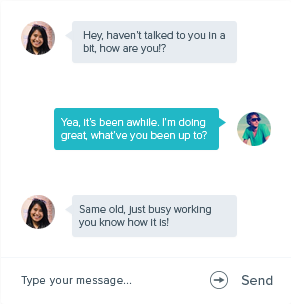
<style>
.page{position:relative;width:291px;height:304px;background:#ffffff}
.page>*{position:absolute;margin:0}
.t1{font:11px "ProximaNova-Light";color:#475965}
.t2{font:11px "ProximaNova-Light";color:#ffffff}
.t3{font:11px "ProximaNova-Light";letter-spacing:0.05em;color:#475965}
.t4{font:14px "ProximaNova-Regular";letter-spacing:0.01em;color:#475965}
</style>
<div class="page">
<p class="t1" style="left:83px;top:31px;width:142px;height:23px">Hey, haven’t talked to you in a <br>bit, how are you!?</p>
<p class="t2" style="left:61px;top:118px;width:146px;height:23px">Yea, it’s been awhile. I’m doing<br>great, what’ve you been up to?</p>
<p class="t1" style="left:79px;top:205px;width:132px;height:23px">Same old, just busy working <br>you know how it is!</p>
<p class="t3" style="left:21px;top:276px;width:111px;height:10px">Type your message...</p>
<p class="t4" style="left:241px;top:275px;width:32px;height:10px">Send</p>
</div>
